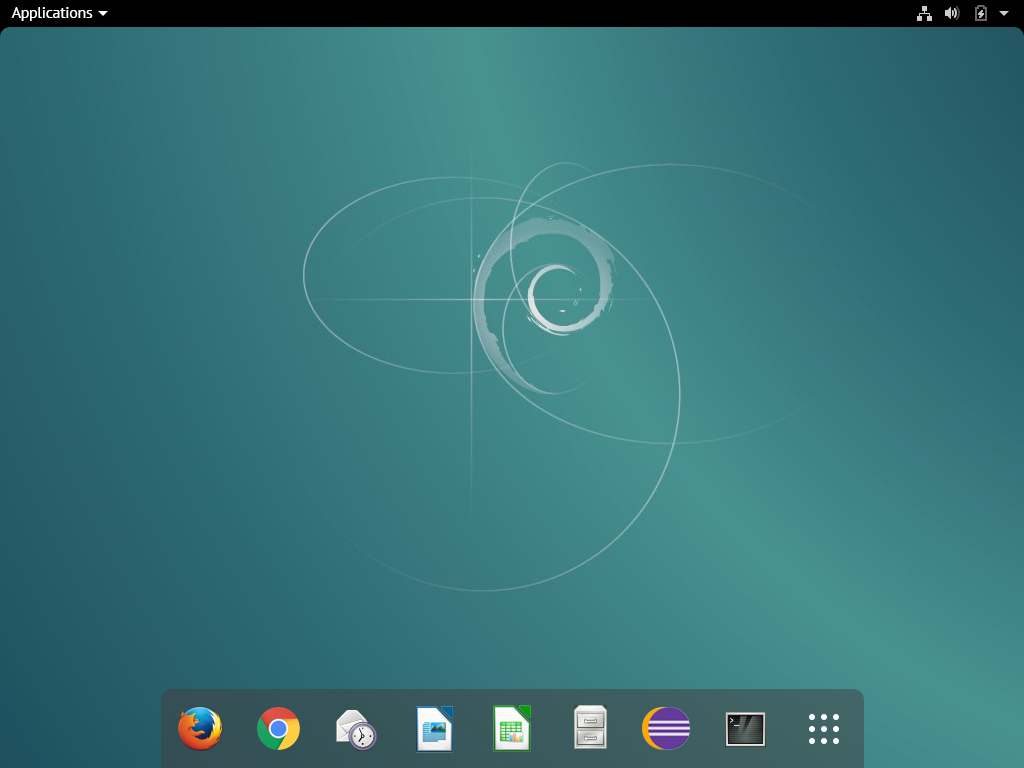
<style>
.page{position:relative;width:1024px;height:768px}
.page>*{position:absolute;margin:0}
.t1{font:16px "PTSans-Regular";letter-spacing:-0.02em;color:#ffffff}
</style>
<div class="page">
<p class="t1" style="left:11px;top:7px;width:82px;height:14px">Applications</p>
</div>
